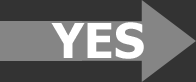
<style>
.page{position:relative;width:196px;height:82px;background:#333333}
.page>*{position:absolute;margin:0}
.t1{font:48px "Tahoma-Bold";color:#ffffff}
</style>
<div class="page">
<p class="t1" style="left:51px;top:22px;width:93px;height:37px">YES</p>
</div>
